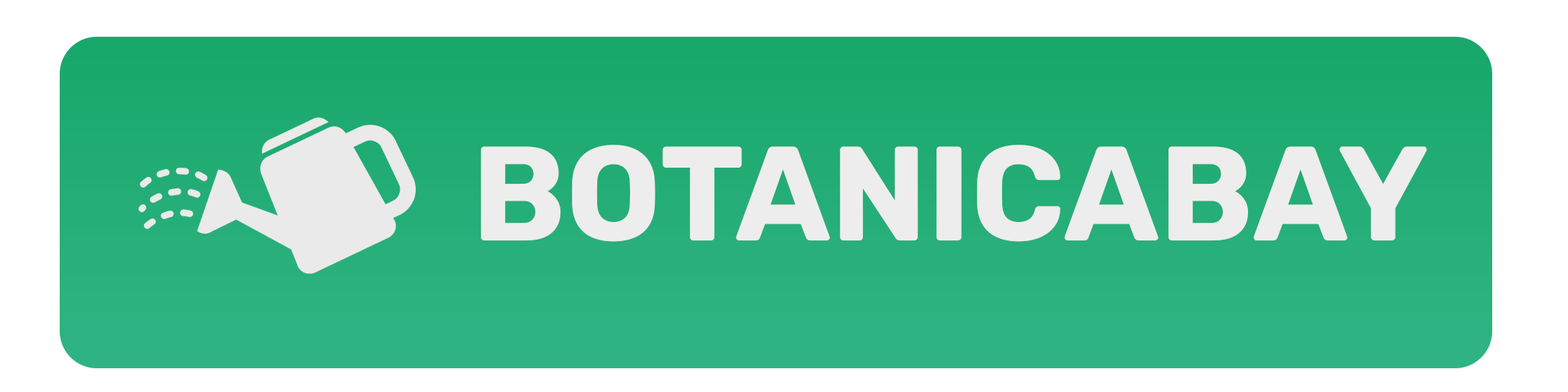
<style>
.page{position:relative;width:1568px;height:392px;background:#ffffff}
.page>*{position:absolute;margin:0}
.t1{font:134px "Rubik-Bold";color:#ededed}
</style>
<div class="page">
<p class="t1" style="left:481px;top:145px;width:946px;height:97px">BOTANICABAY</p>
</div>
